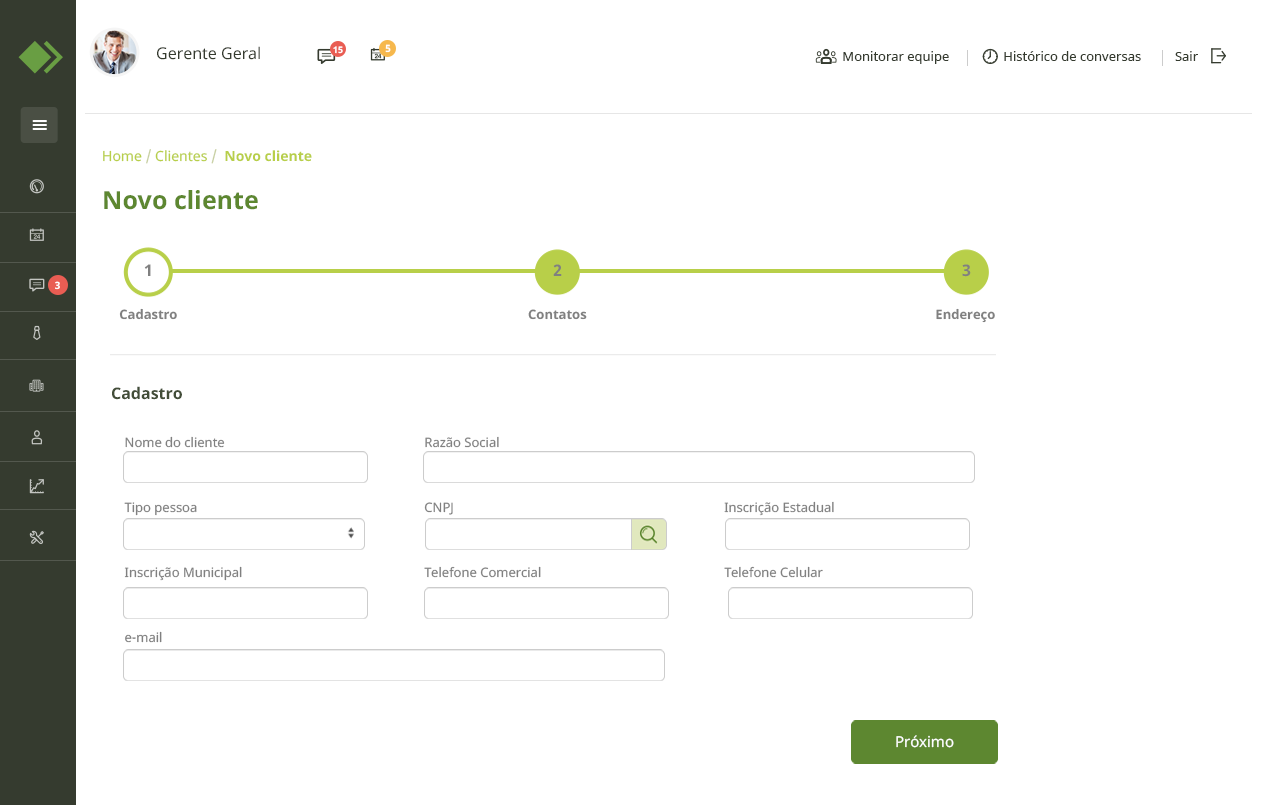
<style>
.page{position:relative;width:1280px;height:805px;background:#ffffff}
.page>*{position:absolute;margin:0}
.t1{font:16px "NotoSans";color:#353b2f}
.t2{font:9px "NotoSans-Bold";color:#ffffff}
.t3{font:10px "NotoSans-Bold";color:#ffffff}
.t4{font:13px "NotoSans";color:#353b2f}
.t5{font:14px "NotoSans-Bold";color:#b8cf49}
.t6{font:14px "NotoSans";color:#b8cf49}
.t7{font:14px "NotoSans";color:#c7cfa1}
.t8{font:25px "NotoSans-Bold";color:#5d8730}
.t9{font:16px "NotoSans-Bold";color:#808080}
.t10{font:13px "NotoSans-Bold";color:#808080}
.t11{font:16px "NotoSans-Bold";color:#424d38}
.t12{font:13px/65.1px "NotoSans";color:#808080}
.t13{font:15px "NotoSans";color:#ffffff}
</style>
<div class="page">
<p class="t1" style="left:157px;top:46px;width:103px;height:14px">Gerente Geral</p>
<p class="t2" style="left:333px;top:46px;width:10px;height:8px">15</p>
<p class="t3" style="left:385px;top:44px;width:6px;height:9px">5</p>
<p class="t4" style="left:843px;top:51px;width:355px;height:13px">Monitorar equipe                Histórico de conversas          Sair</p>
<p class="t5" style="left:103px;top:149px;width:209px;height:15px"><span class="t6">Home </span><span class="t7">/</span><span class="t6"> Clientes </span><span class="t7">/  </span>Novo cliente</p>
<p class="t8" style="left:104px;top:190px;width:154px;height:20px">Novo cliente</p>
<p class="t9" style="left:144px;top:264px;width:7px;height:12px">1</p>
<p class="t9" style="left:553px;top:264px;width:9px;height:12px">2</p>
<p class="t9" style="left:962px;top:264px;width:9px;height:13px">3</p>
<p class="t3" style="left:55px;top:281px;width:5px;height:9px">3</p>
<p class="t10" style="left:119px;top:308px;width:58px;height:12px">Cadastro</p>
<p class="t10" style="left:528px;top:309px;width:59px;height:11px">Contatos</p>
<p class="t10" style="left:936px;top:308px;width:59px;height:15px">Endereço</p>
<p class="t11" style="left:112px;top:386px;width:70px;height:14px">Cadastro</p>
<p class="t12" style="left:124px;top:436px;width:118px;height:207px">Nome do cliente<br>Tipo pessoa<br>Inscrição Municipal<br>e-mail</p>
<p class="t12" style="left:424px;top:436px;width:117px;height:142px">Razão Social<br>CNPJ<br>Telefone Comercial</p>
<p class="t12" style="left:724px;top:501px;width:110px;height:77px">Inscrição Estadual<br>Telefone Celular</p>
<p class="t13" style="left:896px;top:735px;width:58px;height:13px">Próximo</p>
</div>
